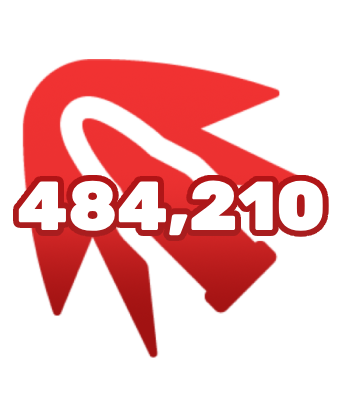
<style>
.page{position:relative;width:343px;height:417px;background:#ffffff}
.page>*{position:absolute;margin:0}
.t1{font:69.3px "Rubik-Black";color:#ffffff}
</style>
<div class="page">
<p class="t1" style="left:18px;top:180px;width:305px;height:56px">484,210</p>
</div>
